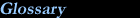
<style>
.page{position:relative;width:140px;height:18px;background:#000000}
.page>*{position:absolute;margin:0}
.t1{font:18px "Garamond-Bold";color:#99ccff;font-style:italic}
</style>
<div class="page">
<p class="t1" style="left:0px;top:2px;width:67px;height:17px">Glossary</p>
</div>
